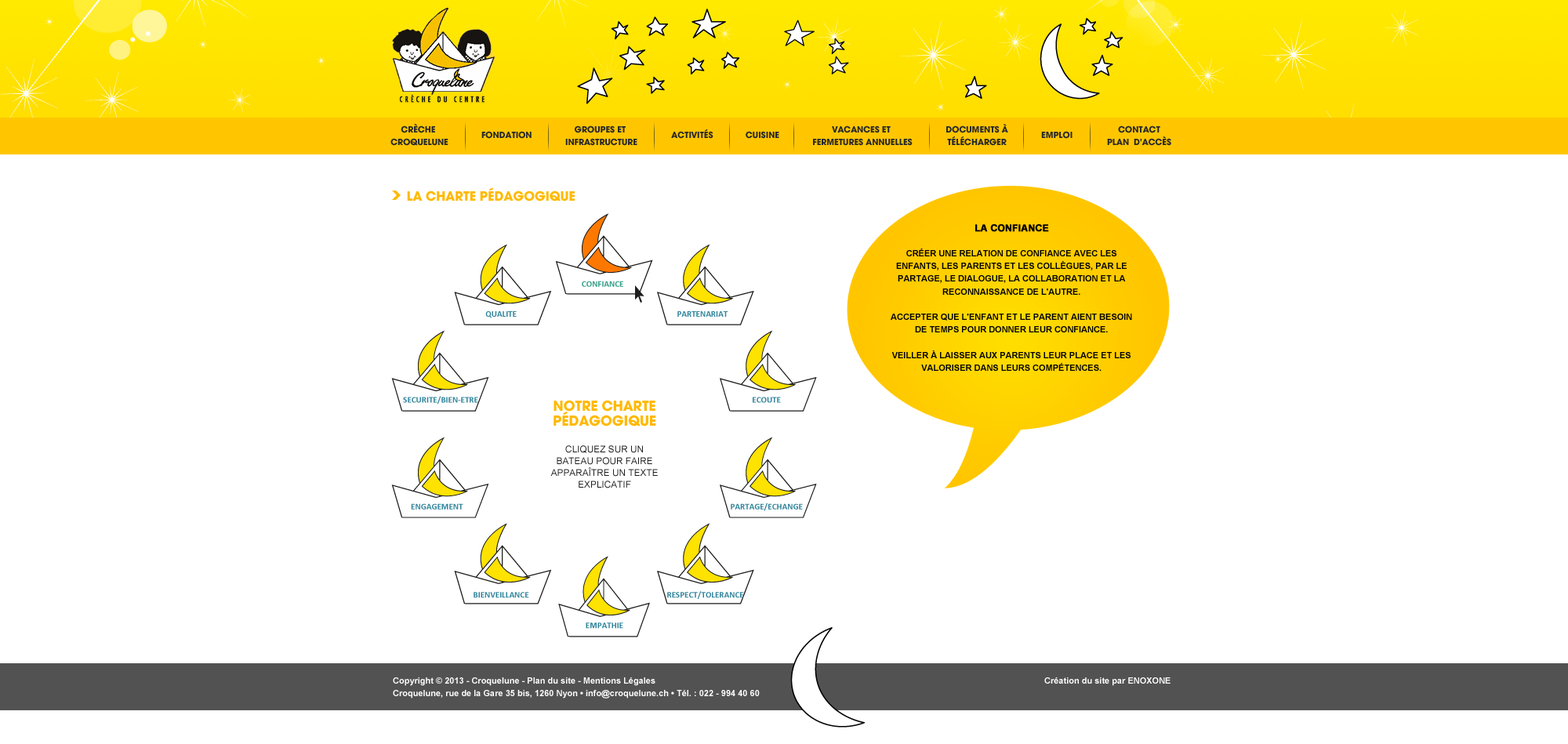
<style>
.page{position:relative;width:1568px;height:744px;background:#ffffff}
.page>*{position:absolute;margin:0}
.t1{font:9.4px/12.7px "AvantGard-Bold";color:#2a2a2a;text-transform:uppercase}
.t2{font:9.4px "AvantGard-Bold";color:#2a2a2a;text-transform:uppercase}
.t3{font:14.1px "AvantGard-Bold";color:#ffb900;text-transform:uppercase}
.t4{font:8.6px/12.7px "Arial-BoldMT";color:#000000;text-transform:uppercase}
.t5{font:9.4px/12.7px "Arial-BoldMT";color:#000000;text-transform:uppercase;font-weight:bold}
.t6{font:9.3px/11.9px "ArialMT";color:#1d1d1d;text-transform:uppercase}
.t7{font:15.2px/14.8px "AvantGard-Bold";color:#ffb900;text-transform:uppercase}
.t8{font:8.6px/12.7px "Arial-BoldMT";color:#ffffff}
</style>
<div class="page">
<p class="t1" style="left:390px;top:123px;width:58px;height:23px;text-align:center">Crèche <br>Croquelune</p>
<p class="t1" style="left:565px;top:125px;width:72px;height:21px;text-align:center">Groupes et <br>infrastructure</p>
<p class="t1" style="left:813px;top:125px;width:100px;height:21px;text-align:center">Vacances et <br>fermetures annuelles</p>
<p class="t1" style="left:946px;top:124px;width:62px;height:22px;text-align:center">DOCUMENTs à<br>télécharger</p>
<p class="t1" style="left:1107px;top:125px;width:64px;height:21px;text-align:center">Contact<br>Plan  d'accès</p>
<p class="t2" style="left:481px;top:131px;width:51px;height:8px">Fondation</p>
<p class="t2" style="left:671px;top:129px;width:42px;height:10px">ACTIVITés</p>
<p class="t2" style="left:746px;top:131px;width:33px;height:8px">Cuisine</p>
<p class="t2" style="left:1041px;top:131px;width:32px;height:8px">Emploi</p>
<p class="t3" style="left:407px;top:187px;width:168px;height:14px">La Charte pédagogique</p>
<p class="t4" style="left:891px;top:224px;width:241px;height:147px;text-align:center"><span class="t5">LA CONFIANCE<br><br></span>Créer une relation de confiance avec les enfants, les parents et les collègues, par le partage, le dialogue, la collaboration et la reconnaissance de l'autre.<br><br>Accepter que l'enfant et le parent aient besoin de temps pour donner leur confiance.<br><br>Veiller à laisser aux parents leur place et les valoriser dans leurs compétences.</p>
<p class="t6" style="left:550px;top:400px;width:108px;height:88px;text-align:center"><span class="t7">NOTRE Charte<br>pédagogique<br><br></span>Cliquez sur un bateau pour faire apparaître un texte explicatif</p>
<p class="t8" style="left:393px;top:677px;width:778px;height:22px">Copyright © 2013 - Croquelune - Plan du site - Mentions Légales                                                             Création du site par ENOXONE<br>Croquelune, rue de la Gare 35 bis, 1260 Nyon • info@croquelune.ch • Tél. : 022 - 994 40 60</p>
</div>
